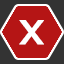
<style>
.page{position:relative;width:64px;height:64px;background:#b51515}
.page>*{position:absolute;margin:0}
.t1{font:44.4px "Verdana";color:#ffffff;font-weight:bold}
</style>
<div class="page">
<p class="t1" style="left:19px;top:20px;width:25px;height:25px">x</p>
</div>
